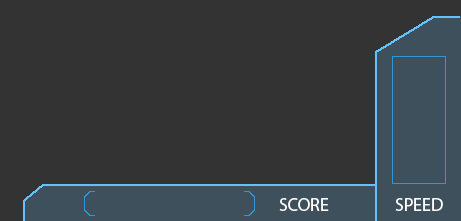
<style>
.page{position:relative;width:461px;height:221px;background:#333333}
.page>*{position:absolute;margin:0}
.t1{font:18px "MyriadPro-Regular";color:#ffffff}
</style>
<div class="page">
<p class="t1" style="left:279px;top:198px;width:50px;height:13px">SCORE</p>
<p class="t1" style="left:395px;top:198px;width:48px;height:13px">SPEED</p>
</div>
